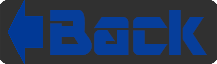
<style>
.page{position:relative;width:217px;height:64px;background:#303030}
.page>*{position:absolute;margin:0}
.t1{font:72px "ARDESTINE";color:#063e9b}
</style>
<div class="page">
<p class="t1" style="left:50px;top:10px;width:157px;height:45px">Back</p>
</div>
